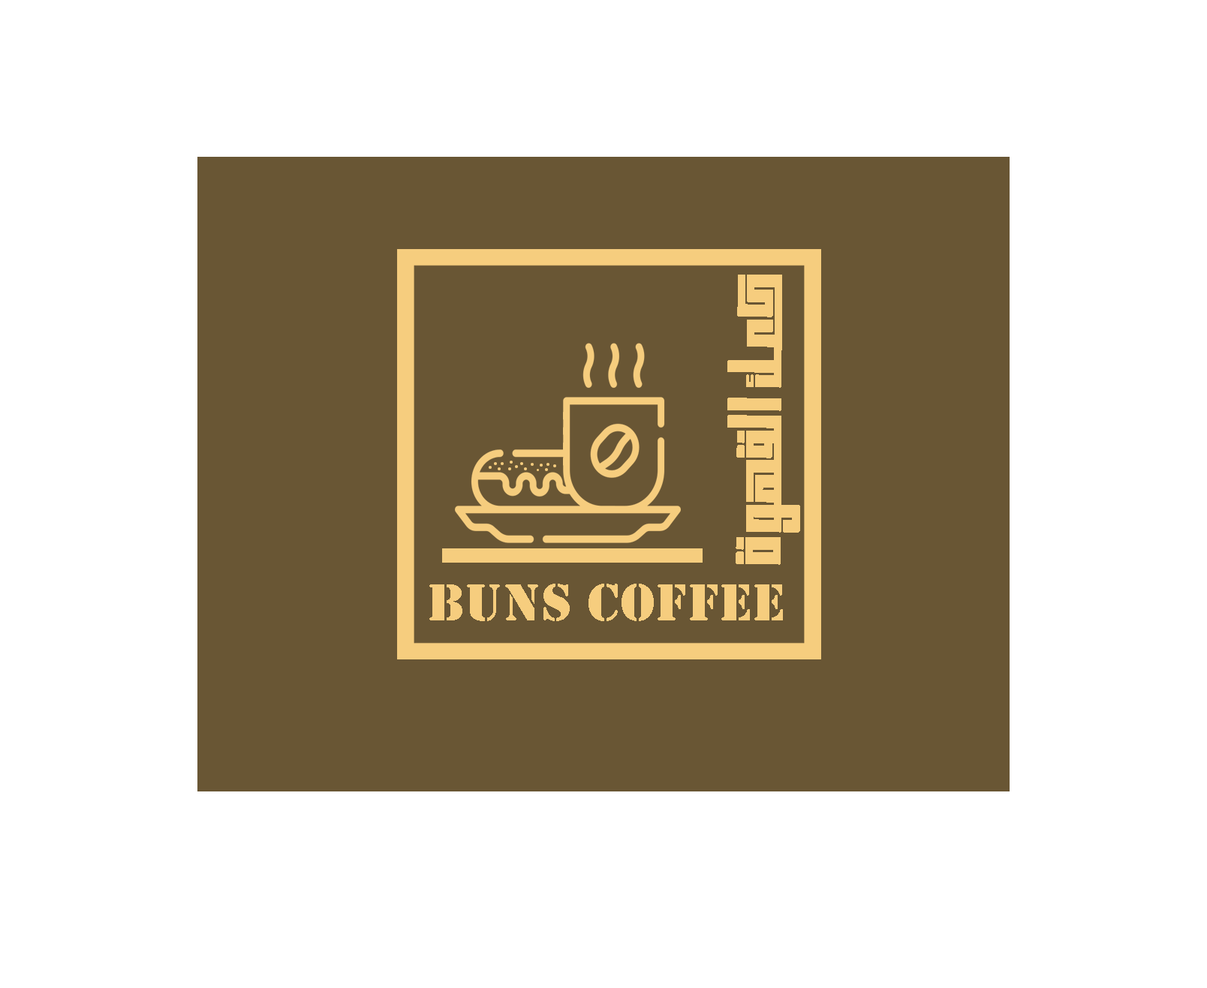
<style>
.page{position:relative;width:1207px;height:988px;background:#ffffff}
.page>*{position:absolute;margin:0}
.t1{font:54.5px "RAOOFSLIGHTROUND";letter-spacing:0.025em;color:#f6cd7e;scale:1.62 1}
.t2{font:54px "Stencil";letter-spacing:0.025em;color:#f6cd7e}
</style>
<div class="page">
<p class="t1" style="left:727px;top:275px;width:73px;height:290px;rotate:-90deg">كعك القهوة</p>
<p class="t2" style="left:429px;top:584px;width:354px;height:37px">buns coffee</p>
</div>
